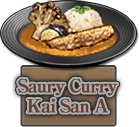
<style>
.page{position:relative;width:139px;height:127px;background:#ffffff}
.page>*{position:absolute;margin:0}
.t1{font:18px/20px "RyuminPro-ExBold";letter-spacing:-0.08em;color:#654031;font-weight:bold}
</style>
<div class="page">
<p class="t1" style="left:18px;top:78px;width:100px;height:35px;text-align:center">Saury Curry<br>Kai San A</p>
</div>
